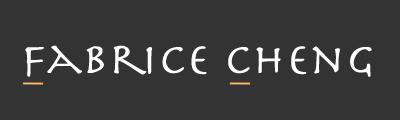
<style>
.page{position:relative;width:400px;height:120px;background:#333333}
.page>*{position:absolute;margin:0}
.t1{font:44.2px "Herculanum";letter-spacing:0.005em;color:#ffffff;scale:1.09 1}
</style>
<div class="page">
<p class="t1" style="left:25px;top:45px;width:347px;height:32px">Fabrice Cheng</p>
</div>
